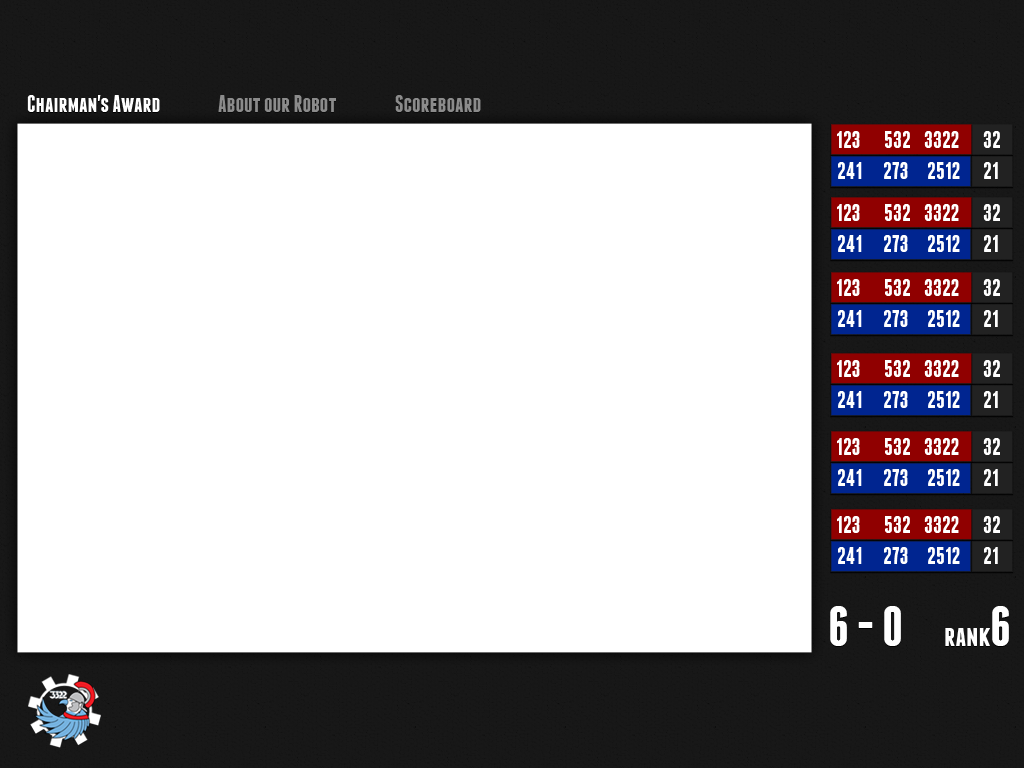
<style>
.page{position:relative;width:1024px;height:768px;background:#ffffff}
.page>*{position:absolute;margin:0}
.t1{font:24px "Franchise-Bold";color:#ffffff}
.t2{font:24px "Franchise-Bold";color:#8b8b8b}
.t3{font:57.5px "Franchise-Bold";color:#ffffff}
.t4{font:30px "Franchise-Bold";color:#ffffff}
</style>
<div class="page">
<p class="t1" style="left:27px;top:95px;width:133px;height:17px">Chairman's Award</p>
<p class="t2" style="left:218px;top:95px;width:118px;height:17px">About our Robot</p>
<p class="t2" style="left:395px;top:95px;width:86px;height:17px">Scoreboard</p>
<p class="t1" style="left:837px;top:131px;width:23px;height:17px">123</p>
<p class="t1" style="left:885px;top:131px;width:25px;height:17px">532</p>
<p class="t1" style="left:924px;top:131px;width:35px;height:17px">3322</p>
<p class="t1" style="left:983px;top:131px;width:17px;height:17px">32</p>
<p class="t1" style="left:838px;top:162px;width:24px;height:17px">241</p>
<p class="t1" style="left:884px;top:162px;width:24px;height:17px">273</p>
<p class="t1" style="left:928px;top:162px;width:32px;height:17px">2512</p>
<p class="t1" style="left:984px;top:162px;width:14px;height:17px">21</p>
<p class="t1" style="left:837px;top:204px;width:23px;height:17px">123</p>
<p class="t1" style="left:885px;top:204px;width:25px;height:17px">532</p>
<p class="t1" style="left:924px;top:204px;width:35px;height:17px">3322</p>
<p class="t1" style="left:983px;top:204px;width:17px;height:17px">32</p>
<p class="t1" style="left:838px;top:235px;width:24px;height:17px">241</p>
<p class="t1" style="left:884px;top:235px;width:24px;height:17px">273</p>
<p class="t1" style="left:928px;top:235px;width:32px;height:17px">2512</p>
<p class="t1" style="left:984px;top:235px;width:14px;height:17px">21</p>
<p class="t1" style="left:837px;top:279px;width:23px;height:17px">123</p>
<p class="t1" style="left:885px;top:279px;width:25px;height:17px">532</p>
<p class="t1" style="left:924px;top:279px;width:35px;height:17px">3322</p>
<p class="t1" style="left:983px;top:279px;width:17px;height:17px">32</p>
<p class="t1" style="left:838px;top:310px;width:24px;height:17px">241</p>
<p class="t1" style="left:884px;top:310px;width:24px;height:17px">273</p>
<p class="t1" style="left:928px;top:310px;width:32px;height:17px">2512</p>
<p class="t1" style="left:984px;top:310px;width:14px;height:17px">21</p>
<p class="t1" style="left:837px;top:360px;width:23px;height:17px">123</p>
<p class="t1" style="left:885px;top:360px;width:25px;height:17px">532</p>
<p class="t1" style="left:924px;top:360px;width:35px;height:17px">3322</p>
<p class="t1" style="left:983px;top:360px;width:17px;height:17px">32</p>
<p class="t1" style="left:838px;top:391px;width:24px;height:17px">241</p>
<p class="t1" style="left:884px;top:391px;width:24px;height:17px">273</p>
<p class="t1" style="left:928px;top:391px;width:32px;height:17px">2512</p>
<p class="t1" style="left:984px;top:391px;width:14px;height:17px">21</p>
<p class="t1" style="left:837px;top:438px;width:23px;height:17px">123</p>
<p class="t1" style="left:885px;top:438px;width:25px;height:17px">532</p>
<p class="t1" style="left:924px;top:438px;width:35px;height:17px">3322</p>
<p class="t1" style="left:983px;top:438px;width:17px;height:17px">32</p>
<p class="t1" style="left:838px;top:469px;width:24px;height:17px">241</p>
<p class="t1" style="left:884px;top:469px;width:24px;height:17px">273</p>
<p class="t1" style="left:928px;top:469px;width:32px;height:17px">2512</p>
<p class="t1" style="left:984px;top:469px;width:14px;height:17px">21</p>
<p class="t1" style="left:837px;top:516px;width:23px;height:17px">123</p>
<p class="t1" style="left:885px;top:516px;width:25px;height:17px">532</p>
<p class="t1" style="left:924px;top:516px;width:35px;height:17px">3322</p>
<p class="t1" style="left:983px;top:516px;width:17px;height:17px">32</p>
<p class="t1" style="left:838px;top:547px;width:24px;height:17px">241</p>
<p class="t1" style="left:884px;top:547px;width:24px;height:17px">273</p>
<p class="t1" style="left:928px;top:547px;width:32px;height:17px">2512</p>
<p class="t1" style="left:984px;top:547px;width:14px;height:17px">21</p>
<p class="t3" style="left:830px;top:606px;width:71px;height:40px">6 - 0</p>
<p class="t4" style="left:945px;top:606px;width:64px;height:40px">rank<span class="t3">6</span></p>
</div>
